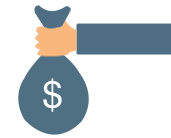
<style>
.page{position:relative;width:171px;height:138px;background:#ffffff}
.page>*{position:absolute;margin:0}
.t1{font:37.4px "HelveticaLTStd-Roman";color:#ffffff}
</style>
<div class="page">
<p class="t1" style="left:43px;top:78px;width:19px;height:34px">$</p>
</div>
